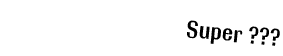
<style>
.page{position:relative;width:283px;height:56px;background:#ffffff}
.page>*{position:absolute;margin:0}
.t1{font:24px "RolloutPlain";color:#000000}
</style>
<div class="page">
<p class="t1" style="left:187px;top:20px;width:93px;height:26px;rotate:6deg">Super ???</p>
</div>
